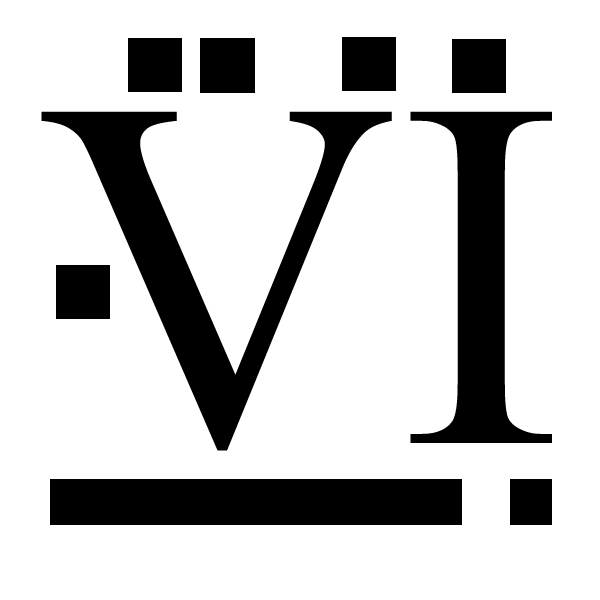
<style>
.page{position:relative;width:600px;height:600px;background:#ffffff}
.page>*{position:absolute;margin:0}
.t1{font:500px "TimesNewRomanPSMT";color:#000000}
</style>
<div class="page">
<p class="t1" style="left:41px;top:111px;width:511px;height:340px">VI</p>
</div>
